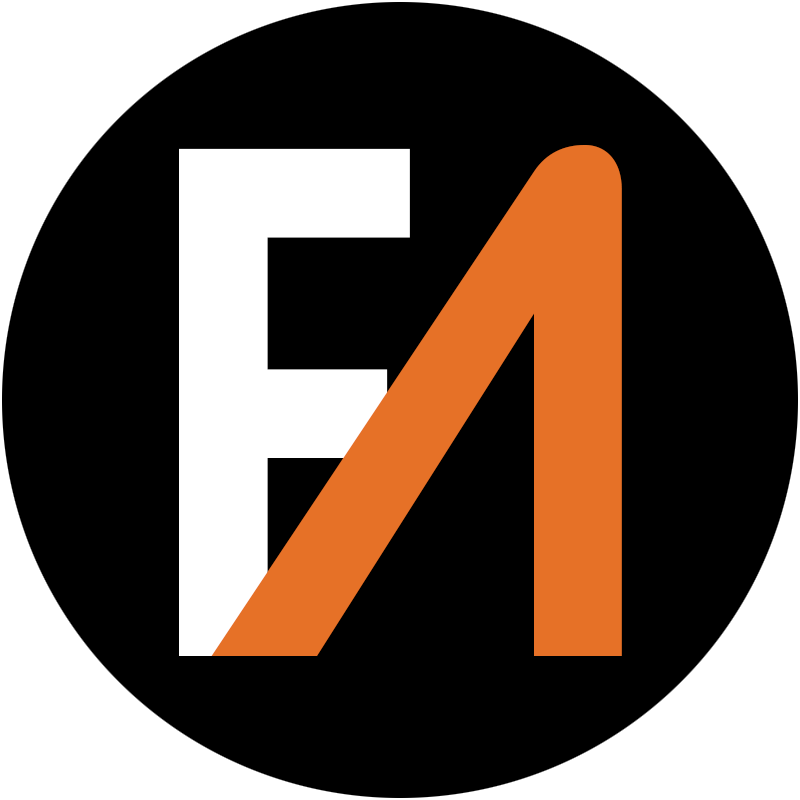
<style>
.page{position:relative;width:800px;height:800px;background:#000000}
.page>*{position:absolute;margin:0}
.t1{font:650px "Strasua-Regular";color:#ffffff}
.t2{font:650px "Strasua-Regular";color:#e67127}
</style>
<div class="page">
<p class="t1" style="left:179px;top:148px;width:231px;height:508px">F</p>
<p class="t2" style="left:211px;top:145px;width:411px;height:511px">A</p>
</div>
